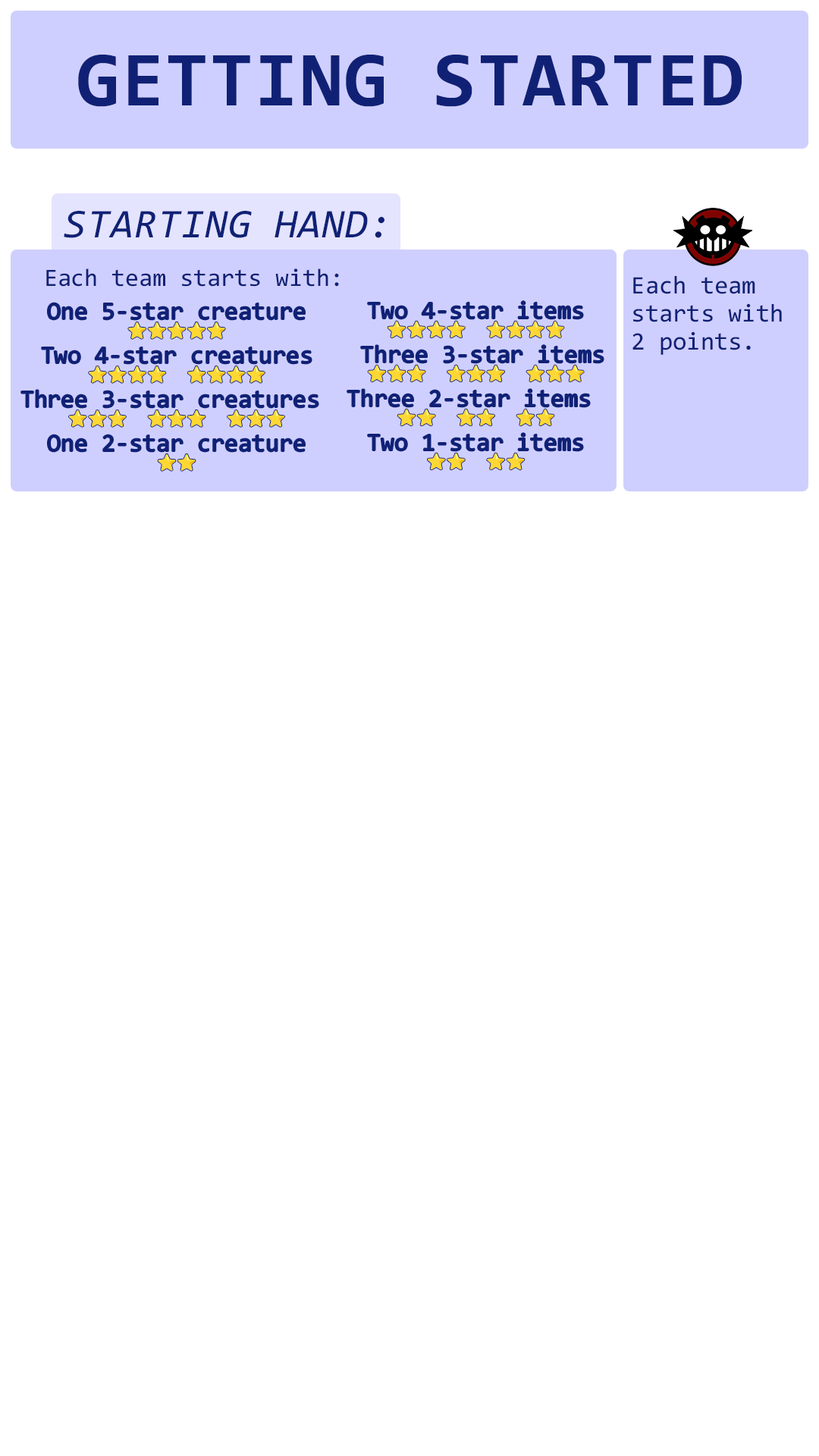
<style>
.page{position:relative;width:819px;height:1456px;background:#ffffff}
.page>*{position:absolute;margin:0}
.t1{font:78.3px "Consolas-Bold";letter-spacing:0.02em;color:#102175}
.t2{font:41.1px "Consolas-Italic";letter-spacing:0.02em;color:#102175}
.t3{font:42.5px "Consolas";color:#102175}
.t4{font:43.2px/28.1px "Consolas";color:#102175}
.t5{font:42.5px/22px "Consolas"}
.t6{font:27.3px/22px "NotoColorEmoji-SVG"}
</style>
<div class="page">
<p class="t1" style="left:78px;top:55px;width:664px;height:52px">GETTING STARTED</p>
<p class="t2" style="left:64px;top:211px;width:320px;height:27px">STARTING HAND:</p>
<p class="t3" style="left:46px;top:268px;width:293px;height:19px">Each team starts with:</p>
<p class="t4" style="left:632px;top:276px;width:150px;height:79px">Each team starts with 2 points.</p>
<p class="t5" style="left:21px;top:303px;width:297px;height:168px;text-align:center">One 5-star creature<br><span class="t6">⭐⭐⭐⭐⭐<br></span>Two 4-star creatures<br><span class="t6">⭐⭐⭐⭐ ⭐⭐⭐⭐<br></span>Three 3-star creatures <br><span class="t6">⭐⭐⭐ ⭐⭐⭐ ⭐⭐⭐<br></span>One 2-star creature<br><span class="t6">⭐⭐</span></p>
<p class="t5" style="left:347px;top:301px;width:257px;height:169px;text-align:center">Two 4-star items<br><span class="t6">⭐⭐⭐⭐ ⭐⭐⭐⭐<br></span> Three 3-star items<br><span class="t6">⭐⭐⭐ ⭐⭐⭐ ⭐⭐⭐<br></span>Three 2-star items <br><span class="t6">⭐⭐ ⭐⭐ ⭐⭐<br></span>Two 1-star items<br><span class="t6">⭐⭐ ⭐⭐</span></p>
</div>
